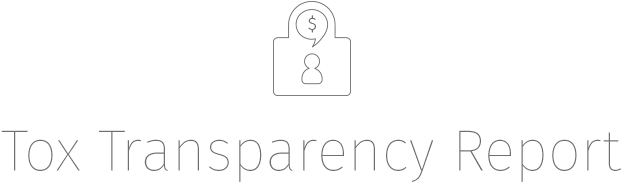
<style>
.page{position:relative;width:623px;height:183px;background:#ffffff}
.page>*{position:absolute;margin:0}
.t1{font:58.3px "FiraSans-Thin";color:#6f6f6f}
</style>
<div class="page">
<p class="t1" style="left:1px;top:130px;width:621px;height:52px">Tox Transparency Report</p>
</div>
